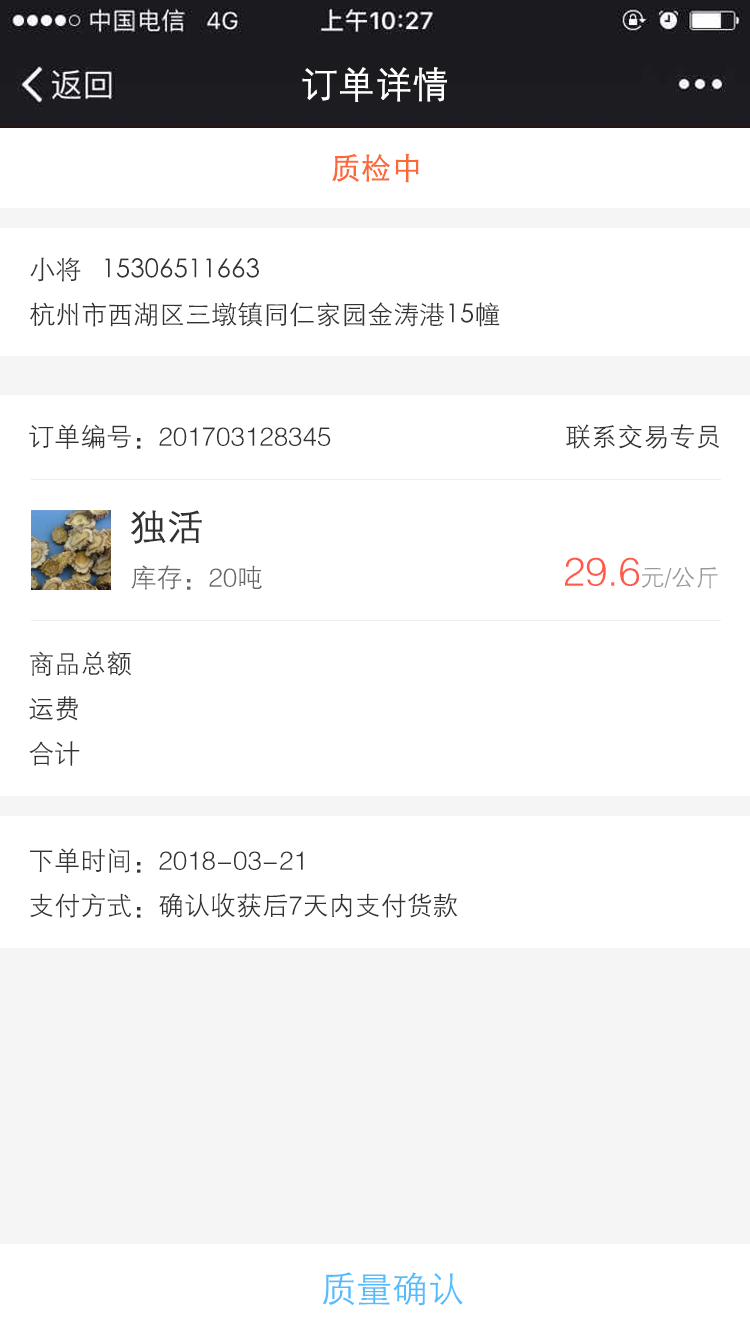
<style>
.page{position:relative;width:750px;height:1334px;background:#ffffff}
.page>*{position:absolute;margin:0}
.t1{font:36px "FZZDXJW--GB1-0";color:#ffffff;font-weight:bold}
.t2{font:30px "STXihei";color:#fb6936;font-weight:bold}
.t3{font:26px "STXihei";color:#333333}
.t4{font:26px "FZZDXJW--GB1-0";color:#333333}
.t5{font:36px "FZZDXJW--GB1-0";color:#333333;font-weight:bold}
.t6{font:40px "FZZDXJW--GB1-0";color:#ff5a49}
.t7{font:24px "FZZDXJW--GB1-0";color:#999999}
.t8{font:26px "FZZDXJW--GB1-0";color:#666666}
.t9{font:36px "STXihei";color:#52bcff}
</style>
<div class="page">
<p class="t1" style="left:302px;top:67px;width:145px;height:35px">订单详情</p>
<p class="t2" style="left:332px;top:153px;width:87px;height:30px">质检中</p>
<p class="t3" style="left:30px;top:257px;width:51px;height:25px">小将</p>
<p class="t3" style="left:105px;top:258px;width:154px;height:20px">15306511663</p>
<p class="t3" style="left:30px;top:302px;width:470px;height:25px">杭州市西湖区三墩镇同仁家园金涛港15幢</p>
<p class="t4" style="left:29px;top:424px;width:302px;height:25px">订单编号：201703128345</p>
<p class="t4" style="left:566px;top:424px;width:153px;height:25px">联系交易专员</p>
<p class="t5" style="left:131px;top:510px;width:71px;height:34px">独活</p>
<p class="t6" style="left:565px;top:557px;width:153px;height:32px">29.6<span class="t7">元/公斤</span></p>
<p class="t8" style="left:131px;top:565px;width:131px;height:25px">库存：20吨</p>
<p class="t4" style="left:30px;top:651px;width:101px;height:25px">商品总额</p>
<p class="t4" style="left:29px;top:696px;width:49px;height:25px">运费</p>
<p class="t4" style="left:29px;top:741px;width:51px;height:25px">合计</p>
<p class="t4" style="left:30px;top:848px;width:273px;height:25px">下单时间：2018-03-21</p>
<p class="t4" style="left:30px;top:893px;width:428px;height:25px">支付方式：确认收获后7天内支付货款</p>
<p class="t9" style="left:322px;top:1272px;width:141px;height:34px">质量确认</p>
</div>
